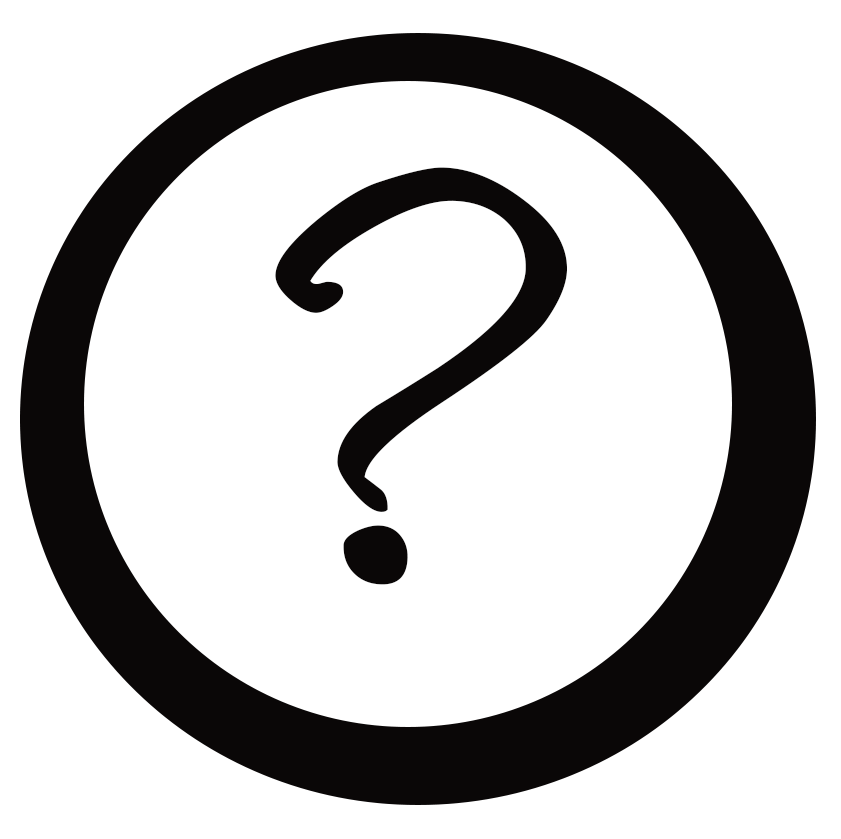
<style>
.page{position:relative;width:841px;height:839px;background:#ffffff}
.page>*{position:absolute;margin:0}
.t1{font:500px "Noteworthy-Light";color:#0a0707}
</style>
<div class="page">
<p class="t1" style="left:275px;top:167px;width:292px;height:418px;rotate:1deg">?</p>
</div>
